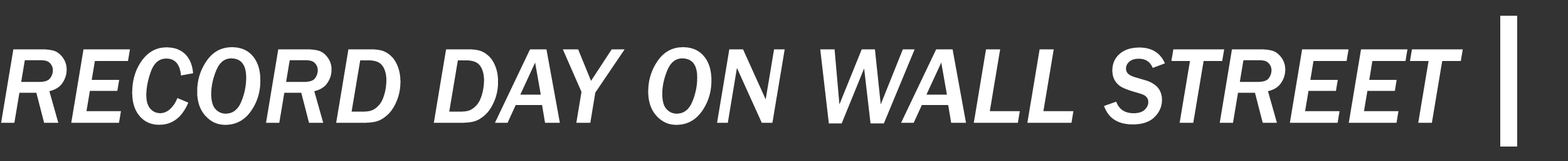
<style>
.page{position:relative;width:1568px;height:161px;background:#333333}
.page>*{position:absolute;margin:0}
.t1{font:109.8px "FranklinGothic-MediumItalic";color:#ffffff}
</style>
<div class="page">
<p class="t1" style="left:1px;top:47px;width:1462px;height:78px">RECORD DAY ON WALL STREET</p>
</div>
